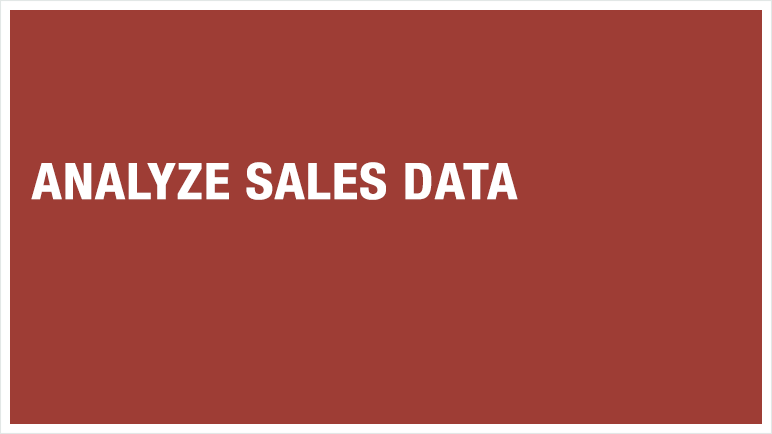
<style>
.page{position:relative;width:772px;height:434px;background:#9e3d35}
.page>*{position:absolute;margin:0}
.t1{font:50px "HelveticaNeue-CondensedBold";color:#ffffff;font-weight:bold;scale:1.07 1}
</style>
<div class="page">
<p class="t1" style="left:31px;top:162px;width:487px;height:38px">ANALYZE SALES DATA</p>
</div>
